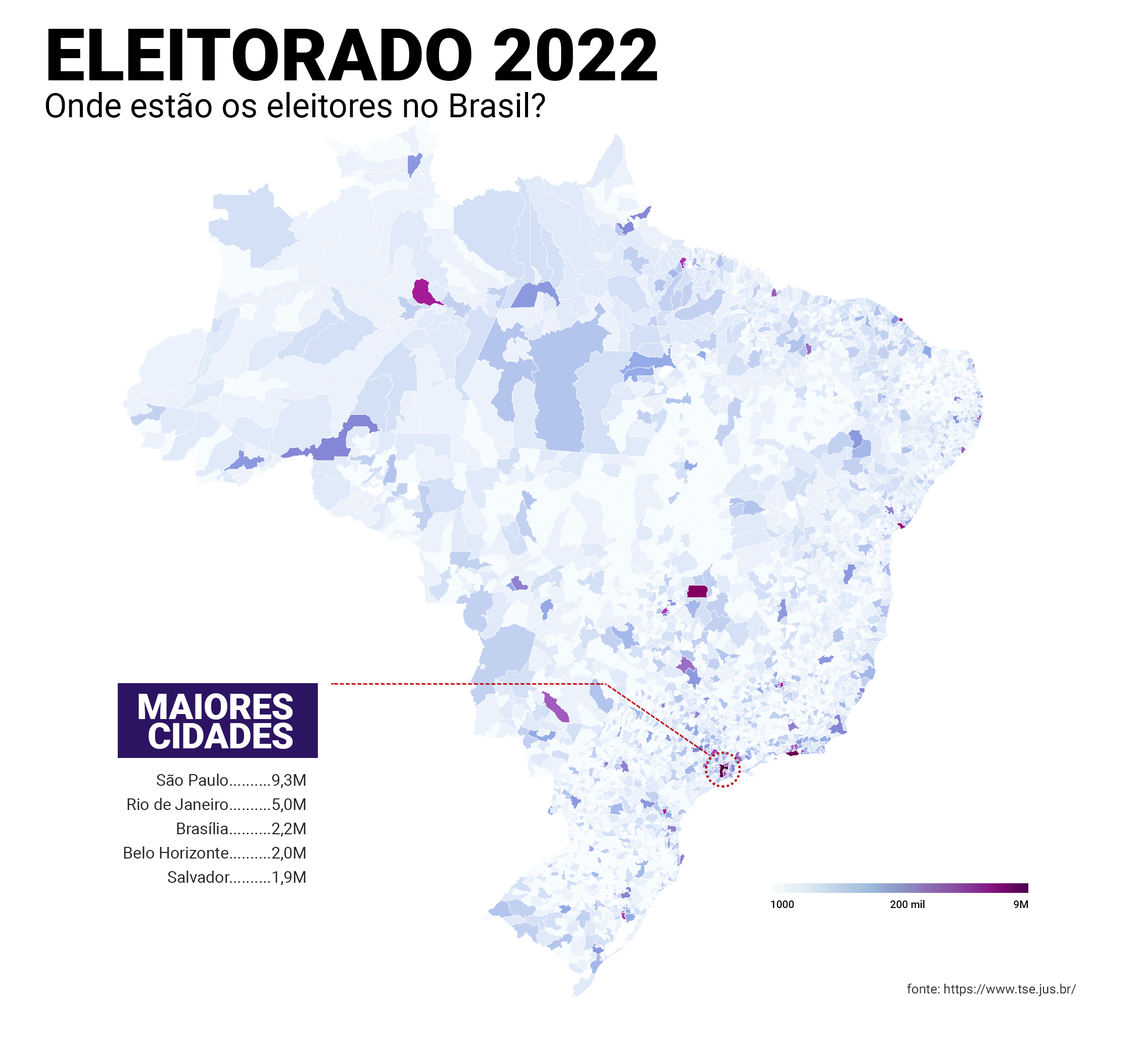
<style>
.page{position:relative;width:1137px;height:1048px;background:#ffffff}
.page>*{position:absolute;margin:0}
.t1{font:72.5px "Roboto-Black";color:#000000}
.t2{font:33.5px "Roboto-Regular";color:#000000}
.t3{font:35.7px/29.3px "Roboto-Black";color:#ffffff}
.t4{font:16.2px/24.3px "Roboto-Regular";color:#242323}
.t5{font:16.2px "Roboto-Regular";color:#242323}
.t6{font:10.5px "Roboto-Medium";color:#000000}
.t7{font:13px "Roboto-Regular";color:#353535}
</style>
<div class="page">
<p class="t1" style="left:48px;top:28px;width:610px;height:53px">ELEITORADO 2022</p>
<p class="t2" style="left:45px;top:92px;width:500px;height:26px">Onde estão os eleitores no Brasil?</p>
<p class="t3" style="left:139px;top:694px;width:154px;height:55px;text-align:right">MAIORES<br>CIDADES</p>
<p class="t4" style="left:124px;top:774px;width:182px;height:112px;text-align:right"><span class="t5"> S</span>ão Paulo..........9,3M<br>Rio de Janeiro..........5,0M<br>Brasília..........2,2M<br>Belo Horizonte..........2,0M<br>Salvador..........1,9M</p>
<p class="t6" style="left:771px;top:901px;width:23px;height:7px">1000</p>
<p class="t6" style="left:891px;top:900px;width:34px;height:8px">200 mil</p>
<p class="t6" style="left:1014px;top:901px;width:15px;height:7px">9M</p>
<p class="t7" style="left:907px;top:984px;width:170px;height:13px">fonte: https://www.tse.jus.br/</p>
</div>
